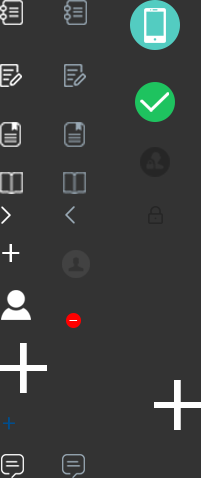
<style>
.page{position:relative;width:201px;height:478px;background:#333333}
.page>*{position:absolute;margin:0}
.t1{font:36px "NotoSansHans-DemiLight";color:#ffffff}
.t2{font:100px "NotoSansHans-DemiLight";color:#ffffff}
.t3{font:24px "NotoSansHans-DemiLight";color:#004d8d}
</style>
<div class="page">
<p class="t1" style="left:2px;top:244px;width:18px;height:18px">+</p>
<p class="t2" style="left:0px;top:343px;width:47px;height:50px">+</p>
<p class="t2" style="left:154px;top:380px;width:47px;height:50px">+</p>
<p class="t3" style="left:3px;top:417px;width:12px;height:13px">+</p>
</div>
